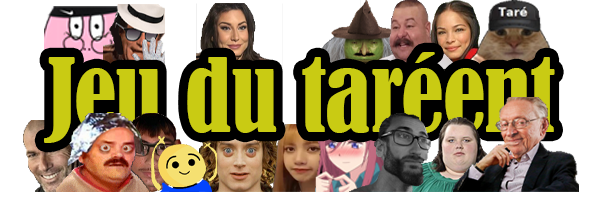
<style>
.page{position:relative;width:600px;height:200px;background:#ffffff}
.page>*{position:absolute;margin:0}
.t1{font:95.4px "BernardMT-Condensed";color:#c9cb13}
</style>
<div class="page">
<p class="t1" style="left:44px;top:52px;width:511px;height:91px">Jeu du taréent</p>
</div>
